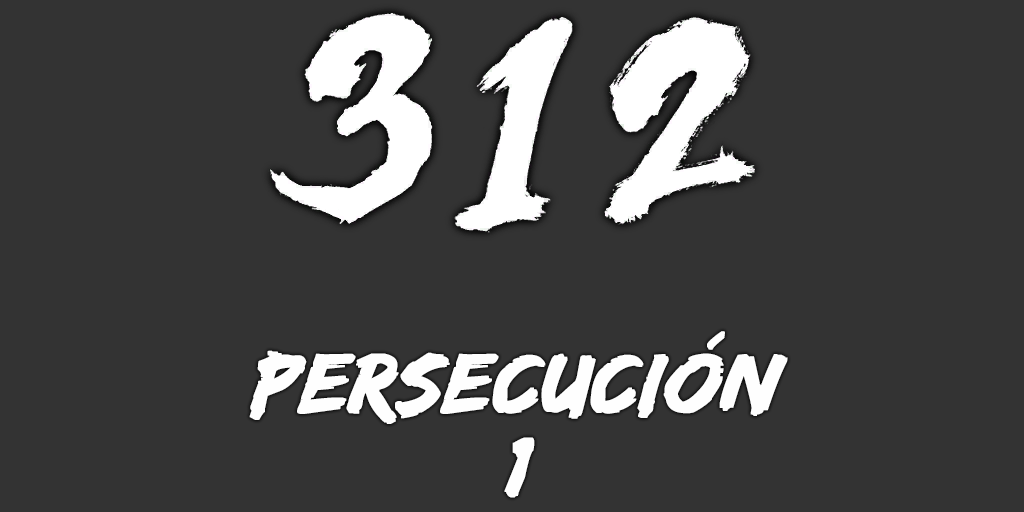
<style>
.page{position:relative;width:1024px;height:512px;background:#333333}
.page>*{position:absolute;margin:0}
.t1{font:88px/82px "EdoSZ";color:#fefefe;font-weight:bold;font-style:italic;scale:1.04 1}
</style>
<div class="page">
<p class="t1" style="left:249px;top:331px;width:539px;height:167px;text-align:center">persecución<br>1</p>
</div>
